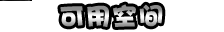
<style>
.page{position:relative;width:224px;height:32px;background:#ffffff}
.page>*{position:absolute;margin:0}
.t1{font:25.3px "DFPHaiBaoW12";letter-spacing:0.05em}
</style>
<div class="page">
<p class="t1" style="left:60px;top:4px;width:103px;height:23px">可用空间</p>
</div>
